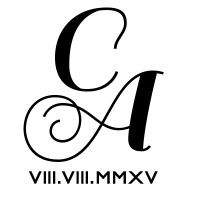
<style>
.page{position:relative;width:200px;height:200px;background:#ffffff}
.page>*{position:absolute;margin:0}
.t1{font:120.8px "Sail-Regular";color:#000000}
.t2{font:16.7px "PetitaBold";letter-spacing:0.04em;color:#000000;font-weight:bold;scale:1.11 1}
</style>
<div class="page">
<p class="t1" style="left:55px;top:7px;width:72px;height:85px">C</p>
<p class="t1" style="left:23px;top:70px;width:141px;height:92px">A</p>
<p class="t2" style="left:29px;top:171px;width:129px;height:13px">VIII.VIII.MMXV</p>
</div>
